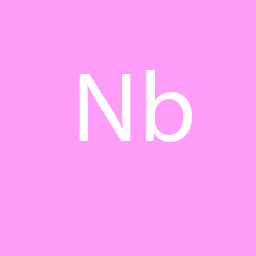
<style>
.page{position:relative;width:256px;height:256px;background:#ff9bf9}
.page>*{position:absolute;margin:0}
.t1{font:100px "MyriadPro-Regular";color:#ffffff}
</style>
<div class="page">
<p class="t1" style="left:79px;top:70px;width:113px;height:72px">Nb</p>
</div>
